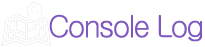
<style>
.page{position:relative;width:205px;height:47px;background:#ffffff}
.page>*{position:absolute;margin:0}
.t1{font:30px "Gulim";letter-spacing:-0.07em;color:#7e57c1}
</style>
<div class="page">
<p class="t1" style="left:49px;top:14px;width:153px;height:28px">Console Log</p>
</div>
